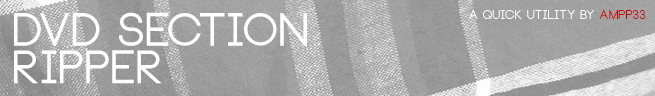
<style>
.page{position:relative;width:655px;height:96px}
.page>*{position:absolute;margin:0}
.t1{font:45.8px "Neou-Bold";color:#ffffff}
.t2{font:12.5px "Neou-Bold";color:#ffffff}
.t3{font:12.5px "Neou-Bold";color:#c60000}
</style>
<div class="page">
<p class="t1" style="left:14px;top:12px;width:293px;height:72px">DVD SECTION RIPPER</p>
<p class="t2" style="left:469px;top:10px;width:177px;height:9px">A QUICK UTILITY BY <span class="t3">AMpp33</span></p>
</div>
